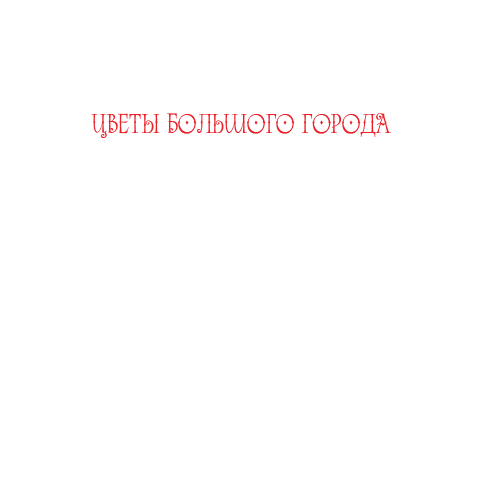
<style>
.page{position:relative;width:480px;height:480px;background:#ffffff}
.page>*{position:absolute;margin:0}
.t1{font:30px "Alice";color:#eb2029}
</style>
<div class="page">
<p class="t1" style="left:91px;top:113px;width:300px;height:25px">цветы большого города</p>
</div>
